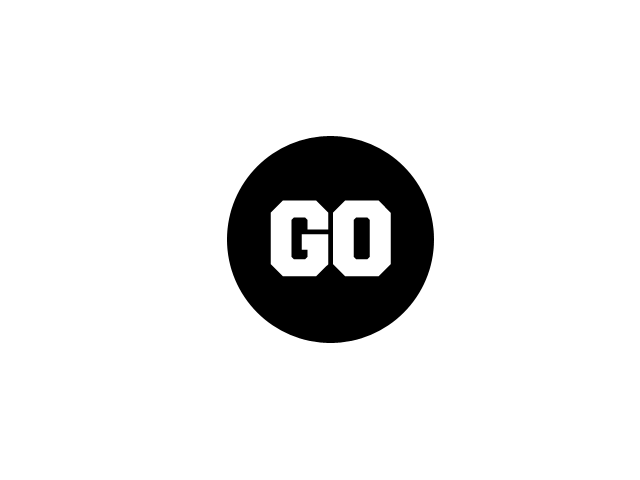
<style>
.page{position:relative;width:640px;height:480px;background:#ffffff}
.page>*{position:absolute;margin:0}
.t1{font:90.9px "Freshman";letter-spacing:-0.01em;color:#ffffff}
</style>
<div class="page">
<p class="t1" style="left:270px;top:200px;width:121px;height:77px">GO</p>
</div>
